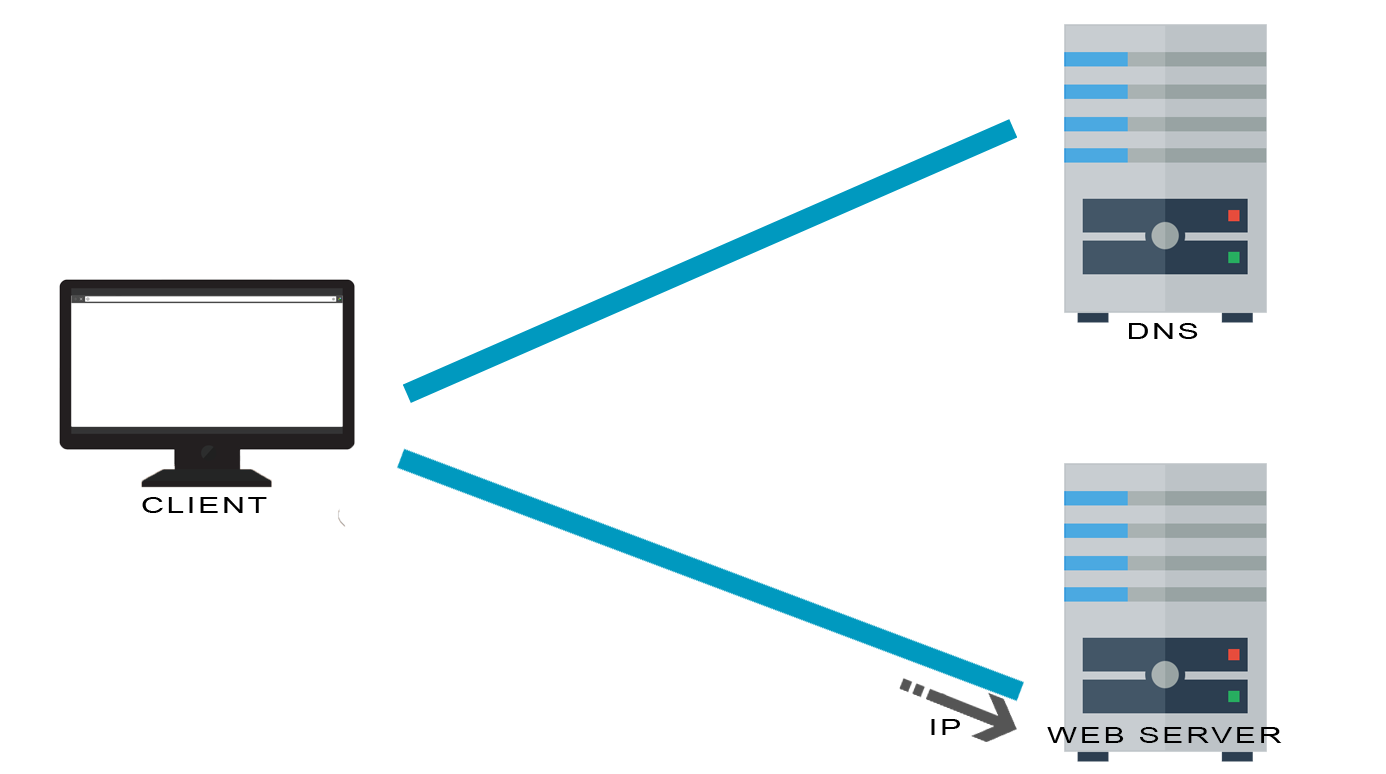
<style>
.page{position:relative;width:1386px;height:774px;background:#ffffff}
.page>*{position:absolute;margin:0}
.t1{font:21.9px "ArialMT";letter-spacing:0.08em;color:#000000;scale:1.45 1}
</style>
<div class="page">
<p class="t1" style="left:1129px;top:323px;width:69px;height:16px">DNS</p>
<p class="t1" style="left:142px;top:497px;width:125px;height:16px">CLIENT</p>
<p class="t1" style="left:931px;top:719px;width:29px;height:16px">IP</p>
<p class="t1" style="left:1047px;top:727px;width:235px;height:16px">WEB SERVER</p>
</div>
